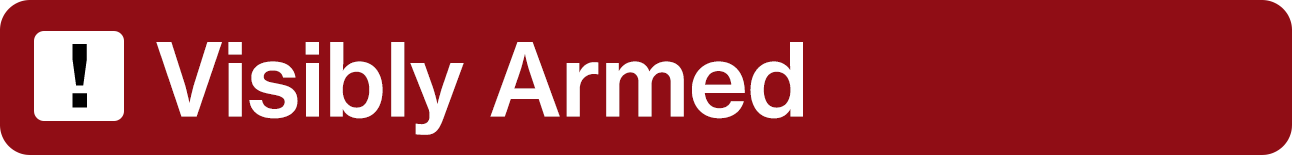
<style>
.page{position:relative;width:1292px;height:155px;background:#900d15}
.page>*{position:absolute;margin:0}
.t1{font:100px "NHaasGroteskTXPro-65Md";color:#ffffff}
</style>
<div class="page">
<p class="t1" style="left:156px;top:42px;width:647px;height:93px">Visibly Armed</p>
</div>
